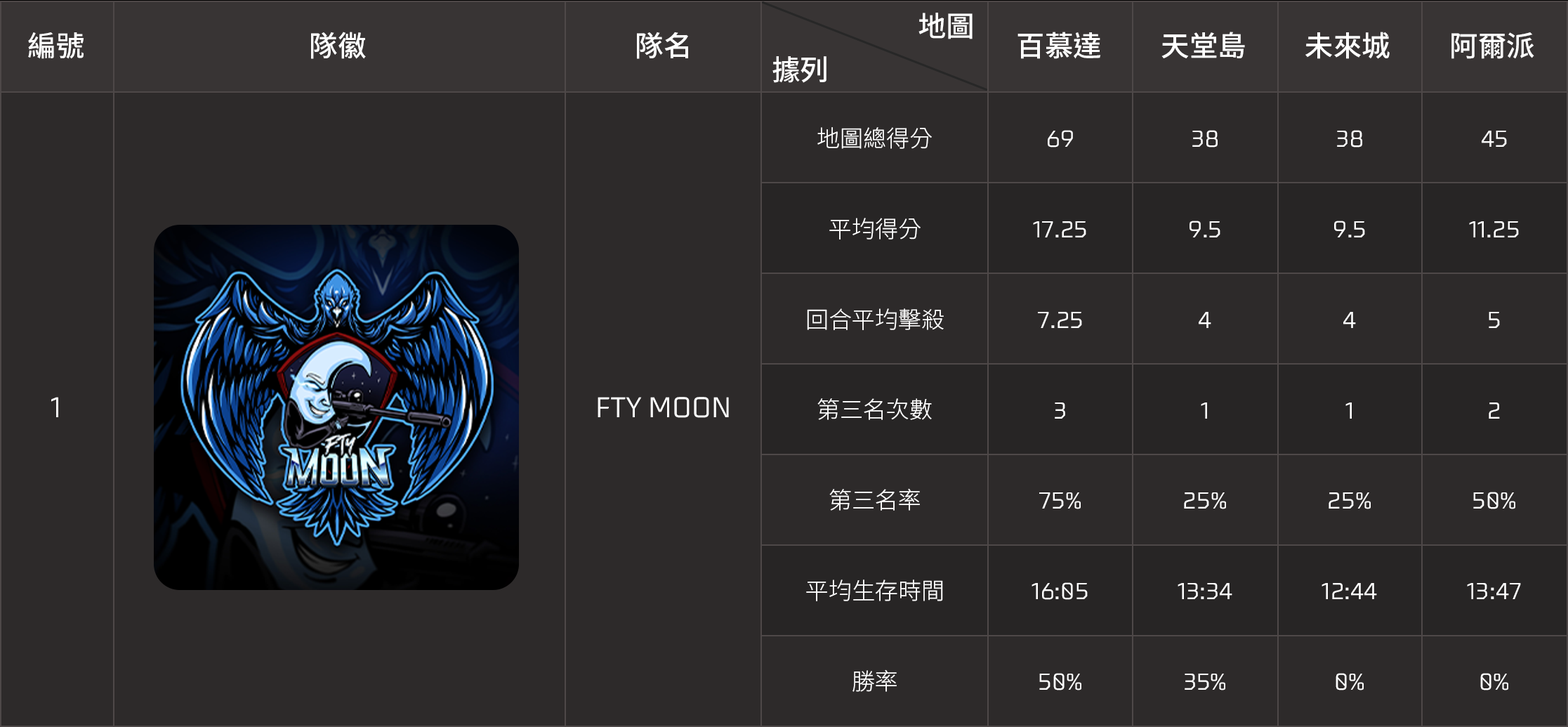
<style>
.page{position:relative;width:1568px;height:727px;background:#2d2a2a}
.page>*{position:absolute;margin:0}
.t1{font:28.5px "NotoSansCJKtc-Medium";color:#ffffff;text-transform:uppercase}
.t2{font:23.2px "NotoSansCJKtc-Light";color:#ffffff;text-transform:uppercase}
.t3{font:23.2px/90.4px "GFF-Latin-Regular";color:#ffffff;text-transform:uppercase}
.t4{font:28.5px "GFF-Latin-Regular";color:#ffffff;text-transform:uppercase}
</style>
<div class="page">
<p class="t1" style="left:918px;top:13px;width:55px;height:26px">地圖</p>
<p class="t1" style="left:28px;top:32px;width:56px;height:27px">編號</p>
<p class="t1" style="left:311px;top:32px;width:55px;height:27px">隊徽</p>
<p class="t1" style="left:637px;top:32px;width:51px;height:27px">隊名</p>
<p class="t1" style="left:1017px;top:32px;width:84px;height:27px">百慕達</p>
<p class="t1" style="left:1161px;top:32px;width:84px;height:26px">天堂島</p>
<p class="t1" style="left:1305px;top:32px;width:85px;height:27px">未來城</p>
<p class="t1" style="left:1451px;top:32px;width:83px;height:27px">阿爾派</p>
<p class="t1" style="left:772px;top:56px;width:54px;height:27px">據列</p>
<p class="t2" style="left:817px;top:127px;width:115px;height:22px">地圖總得分</p>
<p class="t3" style="left:1032px;top:130px;width:56px;height:560px;text-align:center">69<br>17.25<br>7.25<br>3<br>75%<br>16:05<br>50%</p>
<p class="t3" style="left:1178px;top:130px;width:54px;height:560px;text-align:center">38<br>9.5<br>4<br>1<br>25%<br>13:34<br>35%</p>
<p class="t3" style="left:1322px;top:130px;width:55px;height:560px;text-align:center">38<br>9.5<br>4<br>1<br>25%<br>12:44<br>0%</p>
<p class="t3" style="left:1467px;top:131px;width:54px;height:559px;text-align:center">45<br>11.25<br>5<br>2<br>50%<br>13:47<br>0%</p>
<p class="t2" style="left:829px;top:218px;width:92px;height:21px">平均得分</p>
<p class="t2" style="left:807px;top:308px;width:137px;height:22px">回合平均擊殺</p>
<p class="t4" style="left:51px;top:397px;width:7px;height:20px">1</p>
<p class="t4" style="left:598px;top:397px;width:131px;height:21px">FTY MOON</p>
<p class="t2" style="left:817px;top:398px;width:115px;height:22px">第三名次數</p>
<p class="t2" style="left:829px;top:488px;width:91px;height:22px">第三名率</p>
<p class="t2" style="left:806px;top:579px;width:137px;height:22px">平均生存時間</p>
<p class="t2" style="left:852px;top:669px;width:45px;height:23px">勝率</p>
</div>
